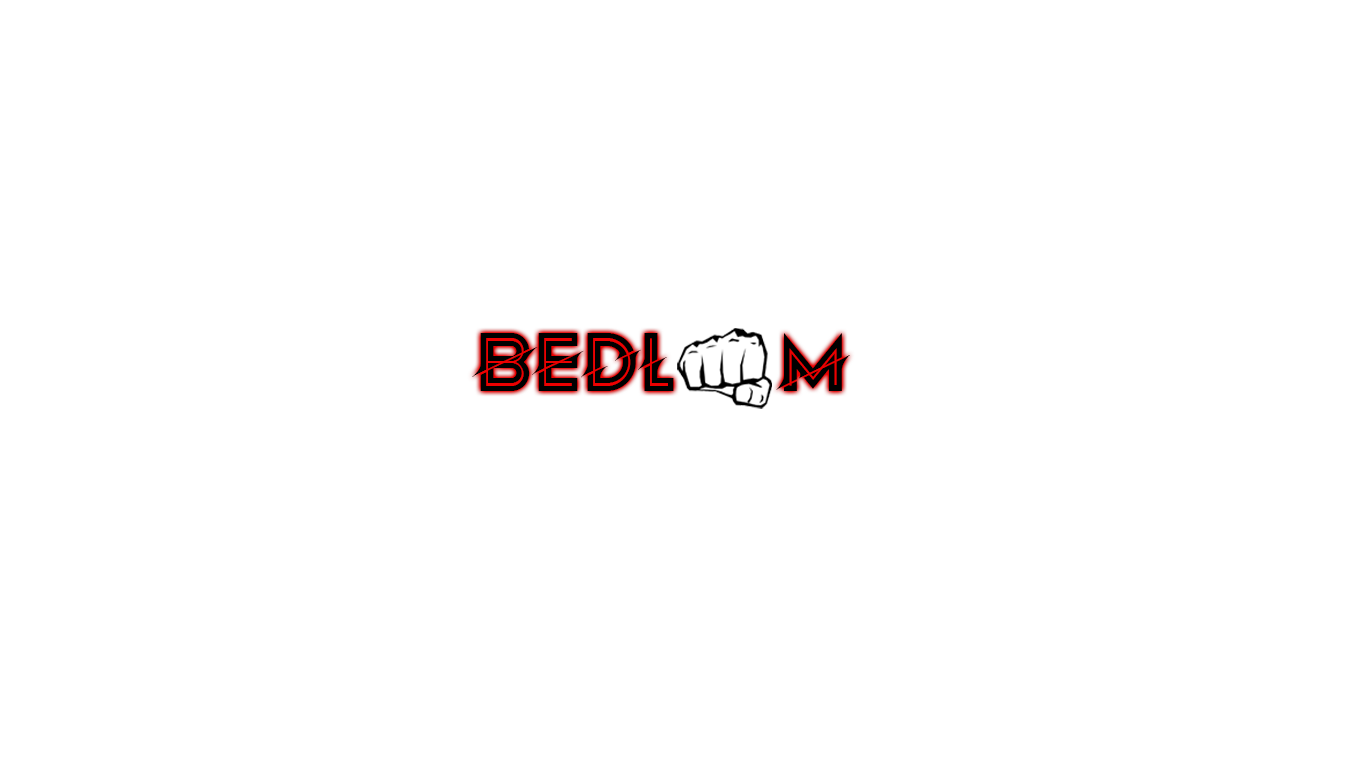
<style>
.page{position:relative;width:1366px;height:768px;background:#ffffff}
.page>*{position:absolute;margin:0}
.t1{font:83.5px "SparkleFilled-Regular";color:#000000}
</style>
<div class="page">
<p class="t1" style="left:472px;top:333px;width:378px;height:58px">Bedl      m</p>
</div>
